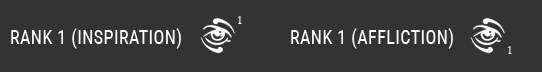
<style>
.page{position:relative;width:542px;height:72px;background:#333333}
.page>*{position:absolute;margin:0}
.t1{font:13.2px "Garamond";letter-spacing:0.025em;color:#ffffff;text-transform:uppercase;scale:0.91 1}
.t2{font:19.8px "RobotoCondensed-Regular";letter-spacing:0.025em;color:#ffffff;text-transform:uppercase;scale:0.91 1}
</style>
<div class="page">
<p class="t1" style="left:237px;top:16px;width:5px;height:8px">1</p>
<p class="t2" style="left:11px;top:28px;width:170px;height:21px">Rank 1 (inspiration)</p>
<p class="t2" style="left:291px;top:28px;width:162px;height:21px">Rank 1 (Affliction)</p>
<p class="t1" style="left:507px;top:46px;width:5px;height:8px">1</p>
</div>
